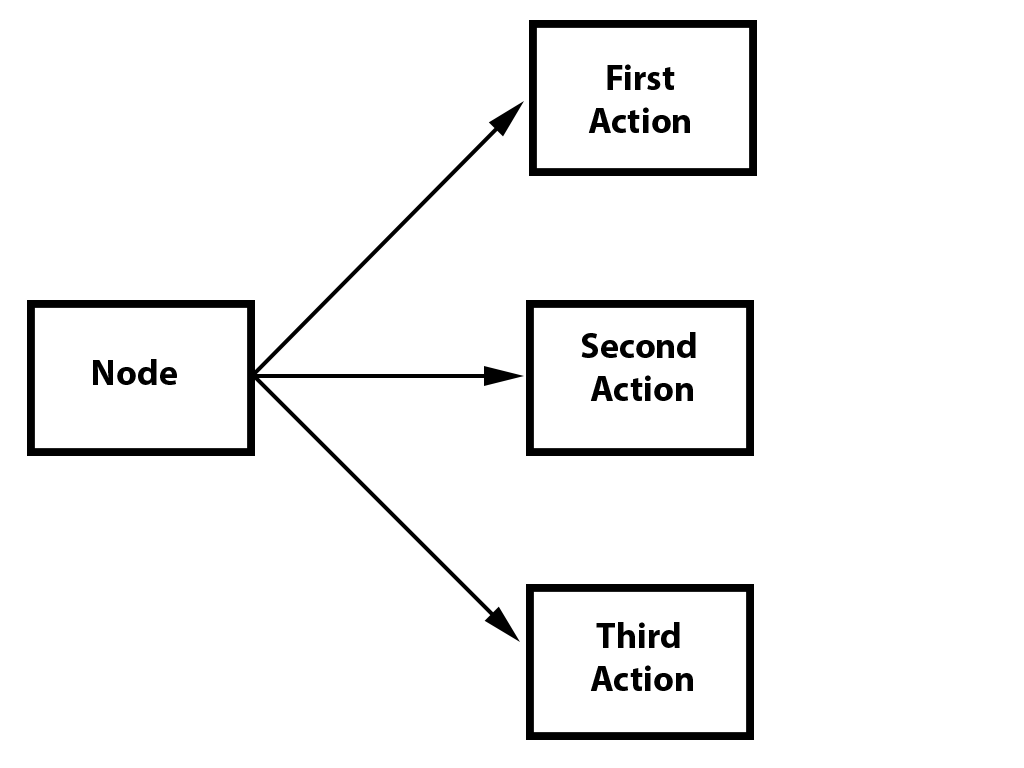
<style>
.page{position:relative;width:1024px;height:768px;background:#ffffff}
.page>*{position:absolute;margin:0}
.t1{font:36px "MyriadPro-Bold";color:#000000}
</style>
<div class="page">
<p class="t1" style="left:588px;top:64px;width:102px;height:69px;text-align:center">First <br>Action</p>
<p class="t1" style="left:581px;top:332px;width:115px;height:69px;text-align:center">Second<br> Action</p>
<p class="t1" style="left:93px;top:359px;width:84px;height:26px">Node</p>
<p class="t1" style="left:590px;top:622px;width:103px;height:69px;text-align:center">Third<br> Action</p>
</div>
